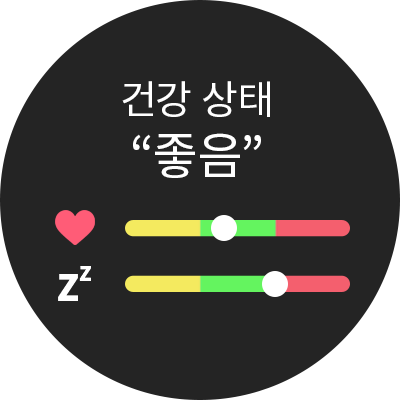
<style>
.page{position:relative;width:400px;height:400px;background:#242424}
.page>*{position:absolute;margin:0}
.t1{font:40px "NotoSansKR-Regular";color:#ffffff}
.t2{font:50px "NotoSansKR-Regular";color:#ffffff}
</style>
<div class="page">
<p class="t1" style="left:122px;top:81px;width:148px;height:97px;text-align:center">건강 상태<br><span class="t2">“좋음”</span></p>
</div>
